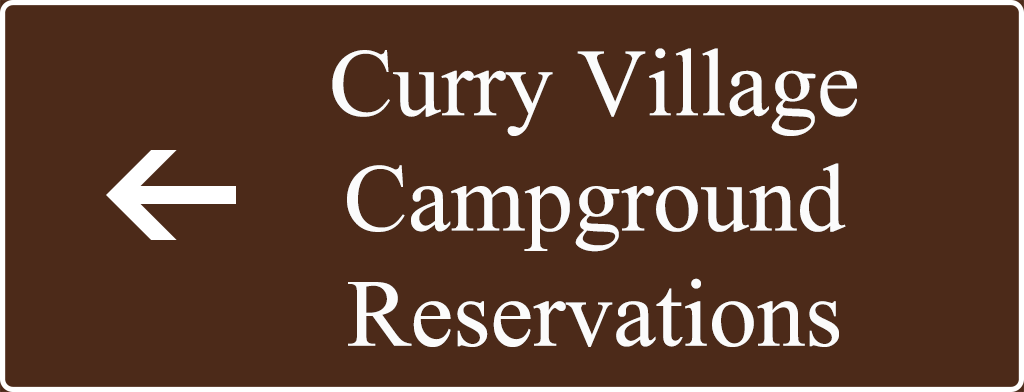
<style>
.page{position:relative;width:1024px;height:392px;background:#4c2a19}
.page>*{position:absolute;margin:0}
.t1{font:96px "IskoolaPota";color:#fbfbfb}
</style>
<div class="page">
<p class="t1" style="left:332px;top:48px;width:525px;height:299px;text-align:center">Curry Village<br>Campground<br>Reservations</p>
</div>
